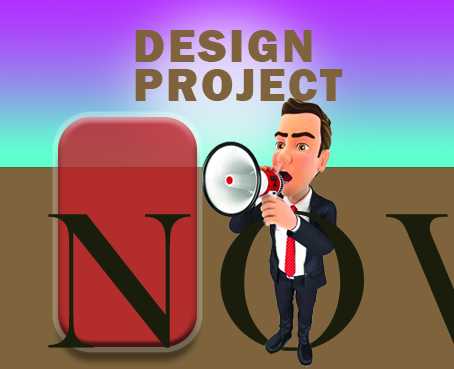
<style>
.page{position:relative;width:454px;height:369px;background:#7e633c}
.page>*{position:absolute;margin:0}
.t1{font:46.8px/39px "FranklinGothic-Heavy";letter-spacing:0.06em;color:#7e633c}
</style>
<div class="page">
<p class="t1" style="left:135px;top:30px;width:208px;height:71px">DESIGN <br>PROJECT</p>
</div>
